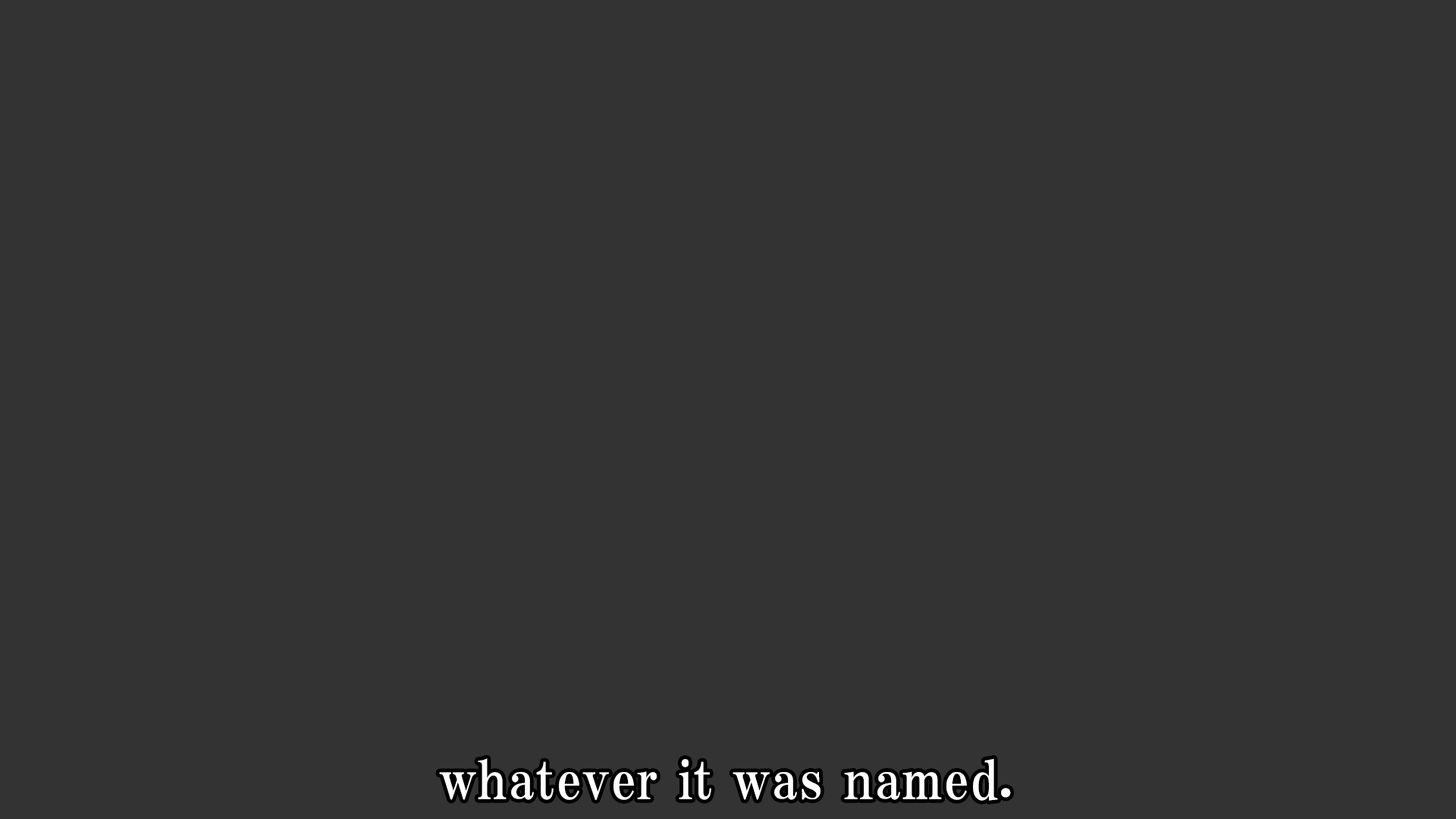
<style>
.page{position:relative;width:1456px;height:819px;background:#333333}
.page>*{position:absolute;margin:0}
.t1{font:53.1px "HGPMinchoE";letter-spacing:0.025em;color:#ffffff}
</style>
<div class="page">
<p class="t1" style="left:439px;top:758px;width:572px;height:43px">whatever it was named.</p>
</div>
